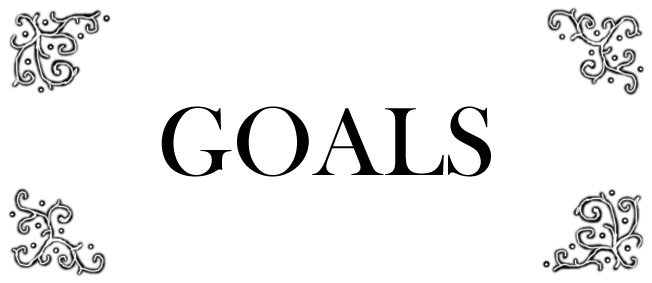
<style>
.page{position:relative;width:652px;height:283px;background:#ffffff}
.page>*{position:absolute;margin:0}
.t1{font:100px "BaskOldFace";color:#000000}
</style>
<div class="page">
<p class="t1" style="left:161px;top:106px;width:330px;height:71px">GOALS</p>
</div>
